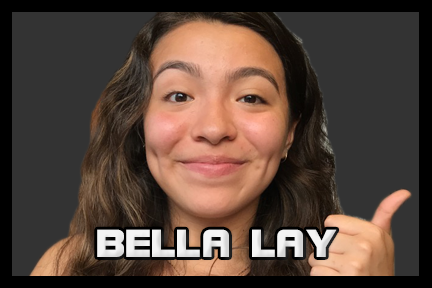
<style>
.page{position:relative;width:432px;height:288px;background:#333333}
.page>*{position:absolute;margin:0}
.t1{font:41.7px "BolsterBold";color:#f3f3f3}
</style>
<div class="page">
<p class="t1" style="left:97px;top:229px;width:240px;height:28px">BELLA LAY</p>
</div>
